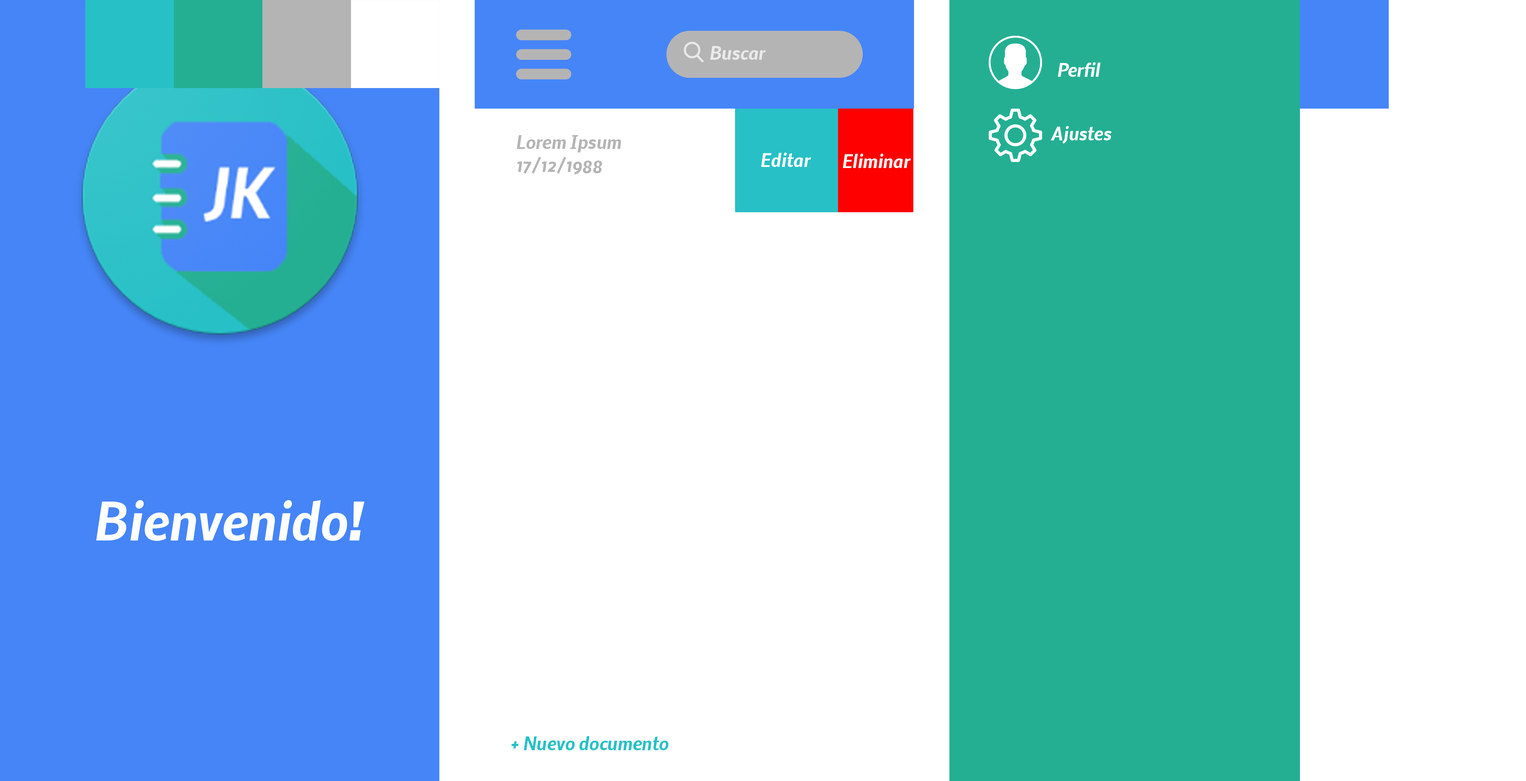
<style>
.page{position:relative;width:1526px;height:781px;background:#ffffff}
.page>*{position:absolute;margin:0}
.t1{font:17.7px "Nobile-BoldItalic";color:#ffffff}
.t2{font:17.7px "Nobile-BoldItalic";color:#b5b4b5}
.t3{font:49.5px "Nobile-BoldItalic";color:#ffffff}
.t4{font:17.7px "Nobile-BoldItalic";color:#27c0c6}
</style>
<div class="page">
<p class="t1" style="left:710px;top:46px;width:56px;height:14px;opacity:0.7">Buscar</p>
<p class="t1" style="left:1058px;top:62px;width:43px;height:15px">Perfil</p>
<p class="t1" style="left:1051px;top:126px;width:61px;height:18px">Ajustes</p>
<p class="t2" style="left:517px;top:135px;width:104px;height:17px">Lorem Ipsum</p>
<p class="t2" style="left:518px;top:157px;width:84px;height:17px">17/12/1988</p>
<p class="t1" style="left:761px;top:152px;width:50px;height:15px">Editar</p>
<p class="t1" style="left:843px;top:154px;width:68px;height:14px">Eliminar</p>
<p class="t3" style="left:96px;top:500px;width:269px;height:41px">Bienvenido!</p>
<p class="t4" style="left:511px;top:736px;width:158px;height:14px">+ Nuevo documento</p>
</div>
